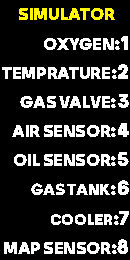
<style>
.page{position:relative;width:130px;height:260px;background:#000000}
.page>*{position:absolute;margin:0}
.t1{font:16.5px/29.2px "Kalameh-Black";letter-spacing:-0.01em;color:#ffffff;scale:1.04 1}
.t2{font:16.5px/29.2px "Kalameh-Black";letter-spacing:-0.01em;color:#fff600;scale:1.04 1}
.t3{font:19.8px/29.2px "Kalameh-Black";letter-spacing:-0.01em;color:#ffffff;scale:1.04 1}
.t4{font:15.5px/29.2px "Kalameh-Black";letter-spacing:-0.01em;color:#ffffff;scale:1.04 1}
.t5{font:14.8px/29.2px "Kalameh-Black";letter-spacing:-0.01em;color:#ffffff;scale:1.04 1}
</style>
<div class="page">
<p class="t1" style="left:2px;top:8px;width:127px;height:246px"><span class="t2">      SIMULATOR  <br></span><span class="t3">1:</span>OXYGEN<br><span class="t3">2:</span>TEMPRATURE<br><span class="t3">3:</span>GAS VALVE<br><span class="t3">4:</span>AIR SENSOR<br><span class="t3">5:</span>OIL SENSOR<br><span class="t3">6:</span><span class="t4">GAS TANK<br></span><span class="t3">7:</span><span class="t5">COOLER <br></span><span class="t3">8:</span>MAP SENSOR</p>
</div>
